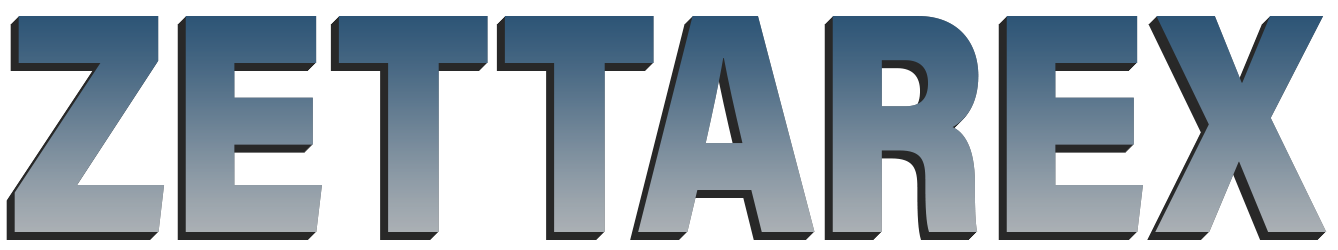
<style>
.page{position:relative;width:1338px;height:250px;background:#ffffff}
.page>*{position:absolute;margin:0}
.t1{font:313.6px "AcuminConcept-Black";scale:0.8 1}
</style>
<div class="page">
<p class="t1" style="left:13px;top:17px;width:1313px;height:216px">ZETTAREX</p>
<p class="t1" style="left:14px;top:16px;width:1313px;height:216px">ZETTAREX</p>
<p class="t1" style="left:14px;top:16px;width:1313px;height:216px">ZETTAREX</p>
<p class="t1" style="left:6px;top:24px;width:1313px;height:216px">ZETTAREX</p>
<p class="t1" style="left:7px;top:23px;width:1313px;height:216px">ZETTAREX</p>
<p class="t1" style="left:8px;top:22px;width:1313px;height:216px">ZETTAREX</p>
<p class="t1" style="left:9px;top:21px;width:1313px;height:216px">ZETTAREX</p>
<p class="t1" style="left:10px;top:20px;width:1313px;height:216px">ZETTAREX</p>
<p class="t1" style="left:11px;top:19px;width:1313px;height:216px">ZETTAREX</p>
<p class="t1" style="left:12px;top:18px;width:1313px;height:216px">ZETTAREX</p>
</div>
